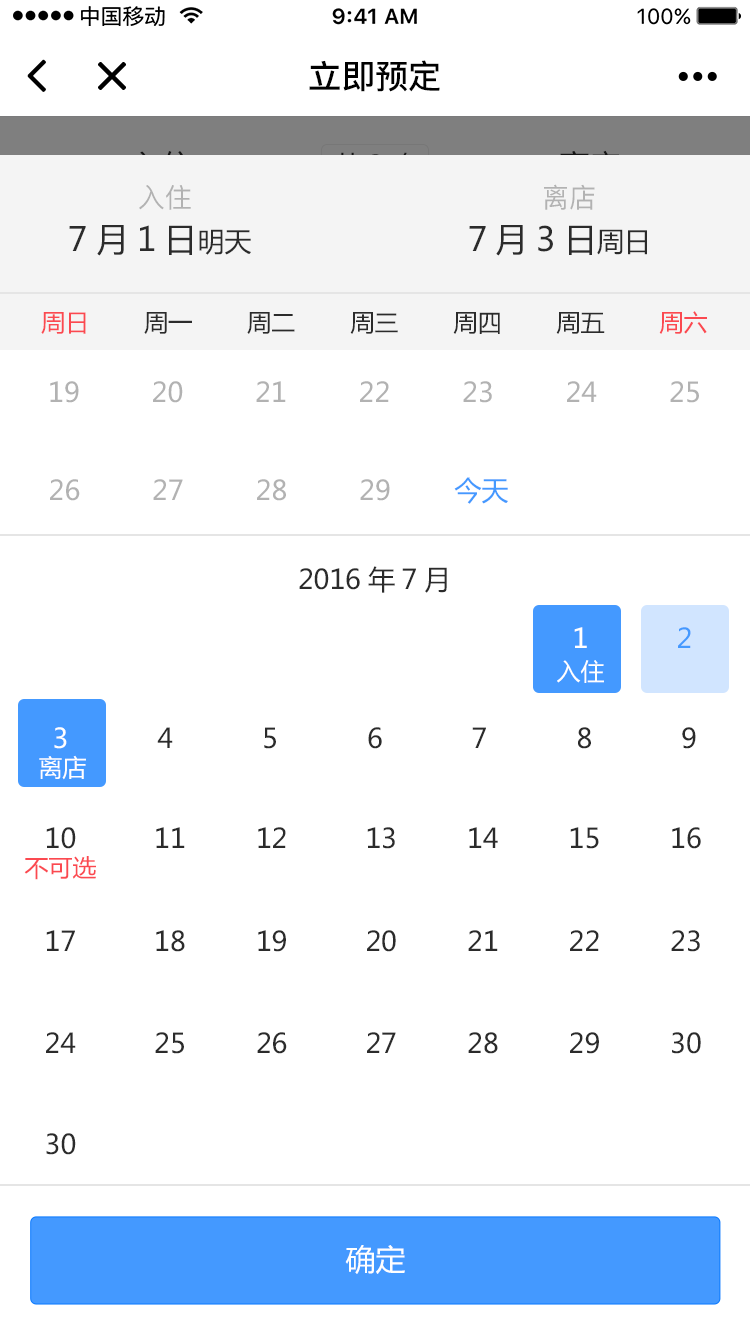
<style>
.page{position:relative;width:750px;height:1334px;background:#ffffff}
.page>*{position:absolute;margin:0}
.t1{font:33.2px "PingFang-SC-Bold";color:#000000}
.t2{font:27px "PingFang-SC-Medium";color:#b2b2b2}
.t3{font:33px "MicrosoftYaHei";color:#2b2b2b}
.t4{font:27px "MicrosoftYaHei";color:#2b2b2b}
.t5{font:24px "MicrosoftYaHei";color:#2b2b2b}
.t6{font:24px "MicrosoftYaHei";color:#fb4950}
.t7{font:27px "MicrosoftYaHei";color:#b2b2b2}
.t8{font:27px "MicrosoftYaHei";color:#4499ff}
.t9{font:24px "MicrosoftYaHei";color:#ffffff}
.t10{font:27px "MicrosoftYaHei";color:#000000}
.t11{font:27px "MicrosoftYaHei";color:#ffffff}
.t12{font:30px "MicrosoftYaHei";color:#ffffff}
</style>
<div class="page">
<p class="t1" style="left:309px;top:60px;width:131px;height:32px">立即预定</p>
<p class="t2" style="left:139px;top:185px;width:52px;height:25px">入住</p>
<p class="t2" style="left:544px;top:184px;width:51px;height:26px">离店</p>
<p class="t3" style="left:69px;top:225px;width:578px;height:31px">7月1日<span class="t4">明天                      </span>7月3日<span class="t4">周日</span></p>
<p class="t5" style="left:41px;top:311px;width:666px;height:23px"><span class="t6">周日　 　</span>周一　　 周二　　 周三　 　周四　 　周五　 　<span class="t6">周六</span></p>
<p class="t7" style="left:50px;top:381px;width:649px;height:22px">19         20         21         22         23         24         25</p>
<p class="t7" style="left:50px;top:477px;width:458px;height:27px">26         27         28         29        <span class="t8">今天</span></p>
<p class="t4" style="left:299px;top:566px;width:148px;height:27px">2016年7月</p>
<p class="t9" style="left:557px;top:660px;width:47px;height:23px">入住</p>
<p class="t4" style="left:54px;top:727px;width:642px;height:22px"><span class="t10"> </span><span class="t11">3　　　 </span>4　　 　5　　　 6　　　 7　　　 8　　 　9</p>
<p class="t9" style="left:39px;top:755px;width:47px;height:25px">离店</p>
<p class="t4" style="left:46px;top:827px;width:655px;height:22px">10　   　11　  　12　　   13　　  14　　  15　  　16</p>
<p class="t6" style="left:24px;top:856px;width:72px;height:24px">不可选</p>
<p class="t4" style="left:46px;top:930px;width:654px;height:22px">17　　   18　　  19　　   20　　  21　　  22　  　23</p>
<p class="t4" style="left:46px;top:1032px;width:655px;height:22px">24　   　25　　  26　   　27　　  28　　  29　  　30</p>
<p class="t4" style="left:46px;top:1133px;width:30px;height:22px">30</p>
<p class="t12" style="left:345px;top:1245px;width:60px;height:29px">确定</p>
</div>
